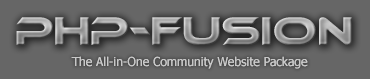
<style>
.page{position:relative;width:370px;height:79px;background:#666666}
.page>*{position:absolute;margin:0}
.t1{font:38.2px "Ethnocentric"}
.t2{font:12.2px "Tahoma";color:#c8c8c8}
</style>
<div class="page">
<p class="t1" style="left:16px;top:17px;width:336px;height:28px">php-fusion</p>
<p class="t2" style="left:71px;top:56px;width:237px;height:13px">The All-in-One Community Website Package</p>
</div>
